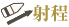
<style>
.page{position:relative;width:69px;height:27px;background:#ffffff}
.page>*{position:absolute;margin:0}
.t1{font:18px "RyuminPro-Heavy";color:#ae9442}
</style>
<div class="page">
<p class="t1" style="left:33px;top:4px;width:35px;height:18px">射程</p>
</div>
